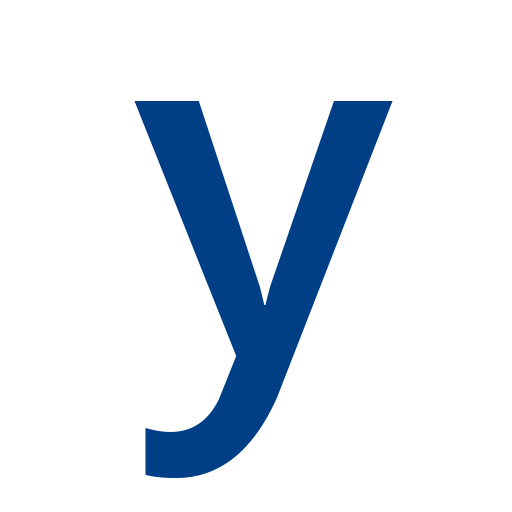
<style>
.page{position:relative;width:512px;height:512px;background:#ffffff}
.page>*{position:absolute;margin:0}
.t1{font:512px "SegoeUI-Semibold";color:#003e85}
</style>
<div class="page">
<p class="t1" style="left:134px;top:101px;width:259px;height:377px">y</p>
</div>
